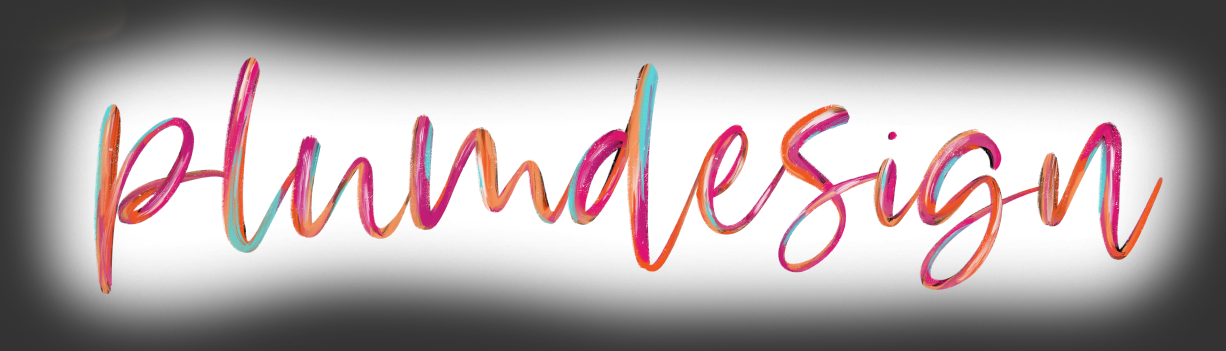
<style>
.page{position:relative;width:1226px;height:351px}
.page>*{position:absolute;margin:0}
.t1{font:300px "RosettaColor"}
</style>
<div class="page">
<p class="t1" style="left:93px;top:56px;width:1070px;height:239px">plumdesign</p>
</div>
